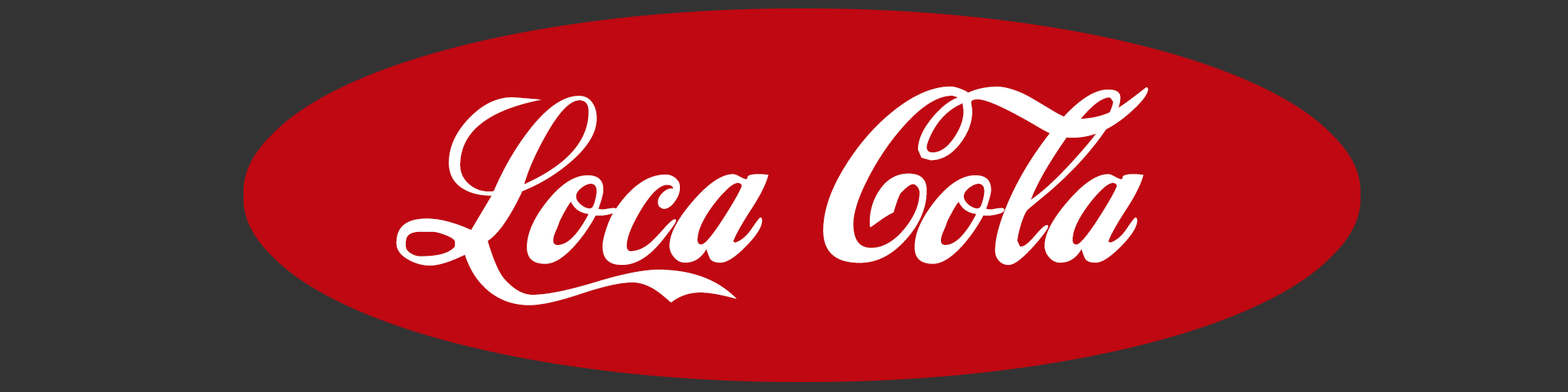
<style>
.page{position:relative;width:1568px;height:392px;background:#333333}
.page>*{position:absolute;margin:0}
.t1{font:229.7px "LokiCola";color:#ffffff}
</style>
<div class="page">
<p class="t1" style="left:396px;top:87px;width:752px;height:218px">Loca Cola</p>
</div>
